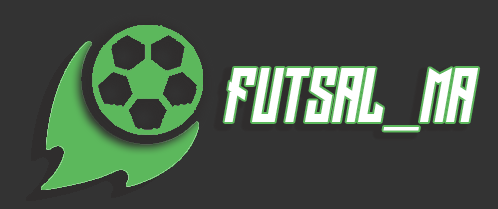
<style>
.page{position:relative;width:498px;height:209px;background:#333333}
.page>*{position:absolute;margin:0}
.t1{font:69.6px "LongShot";color:#ffffff;font-style:italic}
.t2{font:69.6px "MyriadPro-Regular";color:#ffffff;font-style:italic}
</style>
<div class="page">
<p class="t1" style="left:224px;top:68px;width:255px;height:63px">FUTSAL<span class="t2">_</span>MA</p>
</div>
